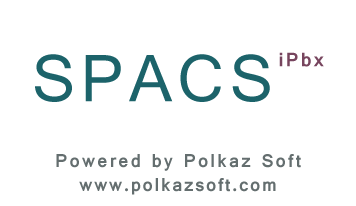
<style>
.page{position:relative;width:356px;height:206px;background:#ffffff}
.page>*{position:absolute;margin:0}
.t1{font:72px "Vrinda";letter-spacing:0.075em;color:#1c636a}
.t2{font:36px "Vrinda-Bold";letter-spacing:0.1em;color:#77455e}
.t3{font:20px "Vrinda-Bold";letter-spacing:0.1em;color:#646e6f}
.t4{font:20px "Vrinda-Bold";letter-spacing:0.075em;color:#646e6f}
</style>
<div class="page">
<p class="t1" style="left:35px;top:52px;width:289px;height:50px">SPACS<span class="t2">iPbx</span></p>
<p class="t3" style="left:56px;top:154px;width:245px;height:41px;text-align:center">Powered by Polkaz Soft<br><span class="t4">www.polkazsoft.com</span></p>
</div>
